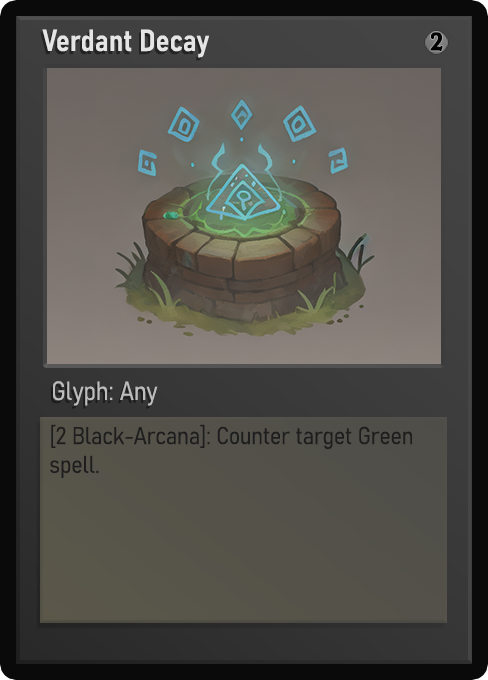
<style>
.page{position:relative;width:488px;height:680px}
.page>*{position:absolute;margin:0}
.t1{font:30px "Bahnschrift-SemiBoldSemiCondensed";color:#f2f2f2;font-weight:bold}
.t2{font:25px "WTRRoycroft";color:#000000;font-weight:bold;scale:1.09 1}
.t3{font:26px "Bahnschrift-LightSemiCondensed";color:#c8c8c8;font-weight:bold}
.t4{font:24px "Bahnschrift-LightSemiCondensed";color:#1e1e1e;font-weight:bold}
</style>
<div class="page">
<p class="t1" style="left:42px;top:29px;width:168px;height:29px;opacity:0.9">Verdant Decay</p>
<p class="t2" style="left:430px;top:32px;width:13px;height:19px">2</p>
<p class="t3" style="left:53px;top:381px;width:105px;height:25px;opacity:0.9">Glyph: Any</p>
<p class="t4" style="left:50px;top:424px;width:362px;height:54px">[2 Black-Arcana]: Counter target Green spell.</p>
</div>
